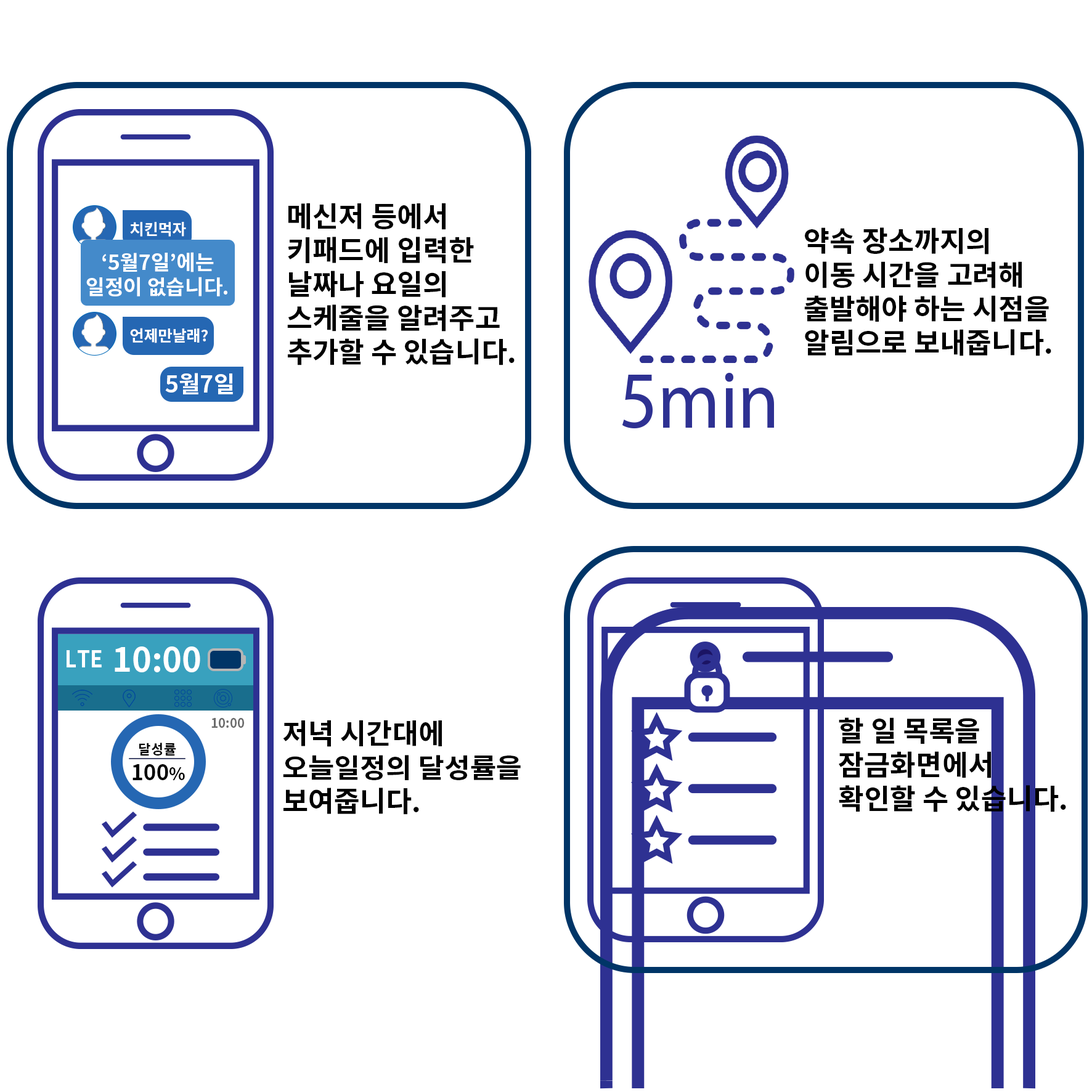
<style>
.page{position:relative;width:1092px;height:1092px;background:#ffffff}
.page>*{position:absolute;margin:0}
.t1{font:28.2px "NotoSansCJKkr-Bold";color:#000000}
.t2{font:15.4px "NotoSansCJKkr-Bold";color:#ffffff}
.t3{font:20.5px "NotoSansCJKkr-Bold";color:#ffffff}
.t4{font:23.1px "NotoSansCJKkr-Bold";color:#ffffff}
.t5{font:23.1px "NotoSansCJKkr-Bold";color:#ffffff;scale:0.9 1}
.t6{font:33.4px "NotoSansCJKkr-Bold";color:#ffffff}
.t7{font:12.8px "NotoSansCJKkr-Bold";color:#6c6c6c}
.t8{font:26.8px "NotoSansCJKkr-Bold";color:#000000;scale:1.05 1}
.t9{font:13.8px "NotoSansCJKkr-Bold";color:#000000}
.t10{font:21.3px "NotoSansCJKkr-Bold";color:#000000}
.t11{font:17px "NotoSansCJKkr-Bold";color:#000000}
</style>
<div class="page">
<p class="t1" style="left:287px;top:203px;width:228px;height:162px">메신저 등에서<br>키패드에 입력한<br>날짜나 요일의 <br>스케줄을 알려주고<br>추가할 수 있습니다.</p>
<p class="t2" style="left:130px;top:222px;width:56px;height:15px">치킨먹자</p>
<p class="t1" style="left:804px;top:227px;width:247px;height:129px">약속 장소까지의 <br>이동 시간을 고려해 <br>출발해야 하는 시점을 <br>알림으로 보내줍니다.</p>
<p class="t3" style="left:86px;top:252px;width:141px;height:44px;text-align:center">‘5월7일’에는<br>일정이 없습니다.</p>
<p class="t2" style="left:130px;top:328px;width:78px;height:15px">언제만날래?</p>
<p class="t4" style="left:165px;top:373px;width:68px;height:21px">5월7일</p>
<p class="t5" style="left:67px;top:650px;width:35px;height:17px">LTE</p>
<p class="t6" style="left:115px;top:646px;width:85px;height:26px">10:00</p>
<p class="t7" style="left:211px;top:718px;width:33px;height:10px">10:00</p>
<p class="t8" style="left:283px;top:720px;width:238px;height:95px"><span class="t1">저녁 시간대에 <br></span>오늘일정의 달성률을<br><span class="t1">보여줍니다.</span></p>
<p class="t1" style="left:839px;top:717px;width:227px;height:95px">할 일 목록을<br>잠금화면에서<br>확인할 수 있습니다.</p>
<p class="t9" style="left:139px;top:743px;width:37px;height:13px">달성률</p>
<p class="t10" style="left:132px;top:764px;width:53px;height:16px">100<span class="t11">%</span></p>
</div>
